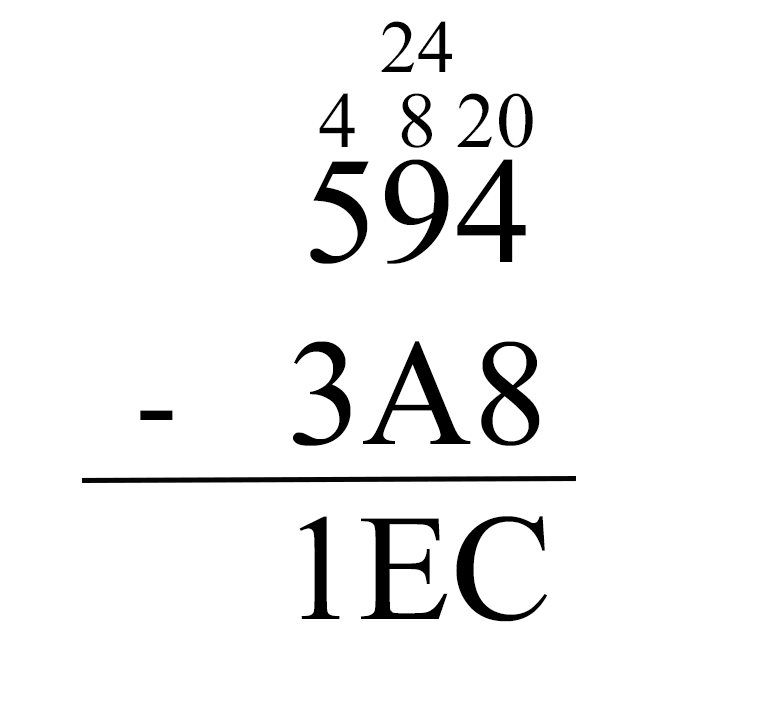
<style>
.page{position:relative;width:779px;height:712px;background:#ffffff}
.page>*{position:absolute;margin:0}
.t1{font:74.8px "TimesNewRomanPSMT";color:#000000}
.t2{font:78.9px "TimesNewRomanPSMT";color:#000000}
.t3{font:151.9px "TimesNewRomanPSMT";color:#000000}
.t4{font:127.6px "TimesNewRomanPSMT";color:#000000}
</style>
<div class="page">
<p class="t1" style="left:381px;top:21px;width:71px;height:51px">24</p>
<p class="t2" style="left:319px;top:93px;width:214px;height:55px">4  8 20</p>
<p class="t3" style="left:293px;top:159px;width:247px;height:287px;text-align:center">594<br>3A8</p>
<p class="t4" style="left:140px;top:410px;width:33px;height:10px">-</p>
<p class="t3" style="left:299px;top:516px;width:248px;height:106px">1EC</p>
</div>
